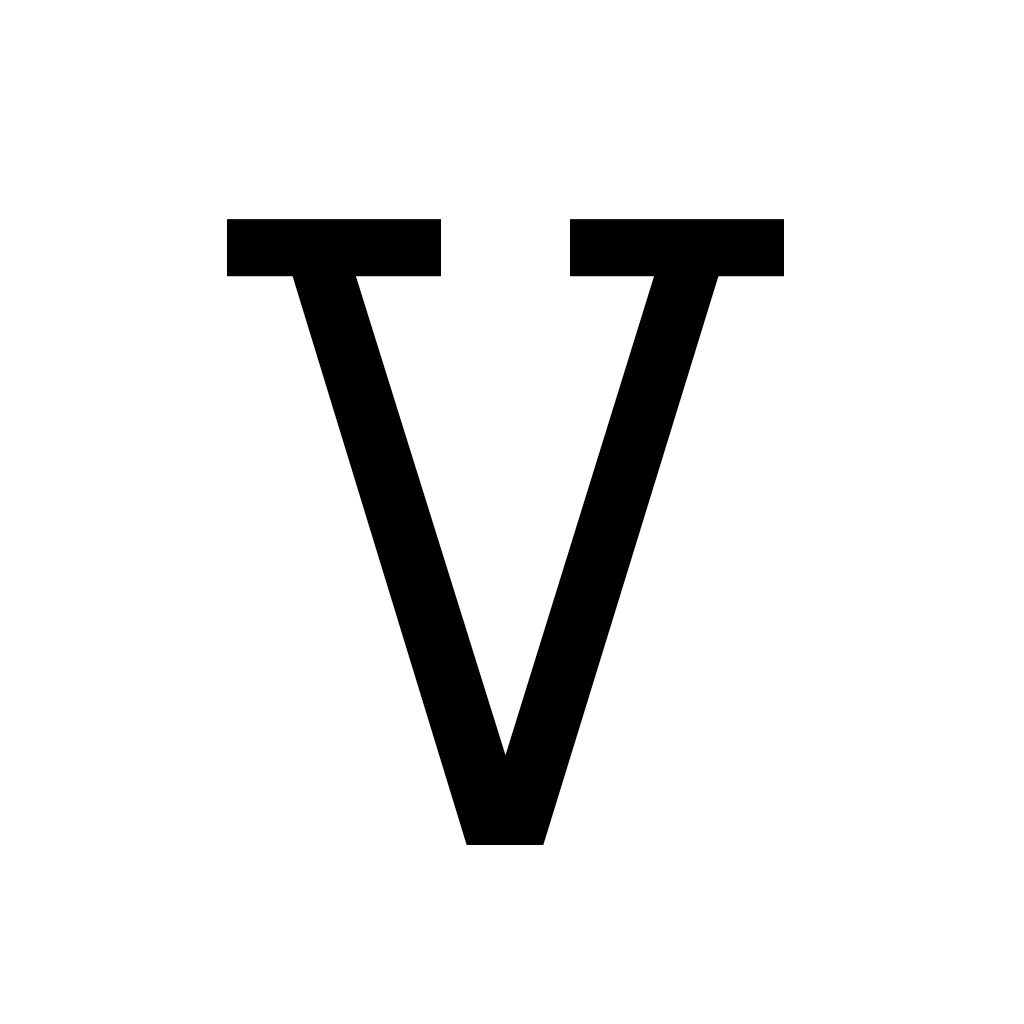
<style>
.page{position:relative;width:1024px;height:1024px;background:#ffffff}
.page>*{position:absolute;margin:0}
.t1{font:1024px "PrestigeEliteStd-Bd";color:#000000}
</style>
<div class="page">
<p class="t1" style="left:227px;top:219px;width:557px;height:626px">V</p>
</div>
